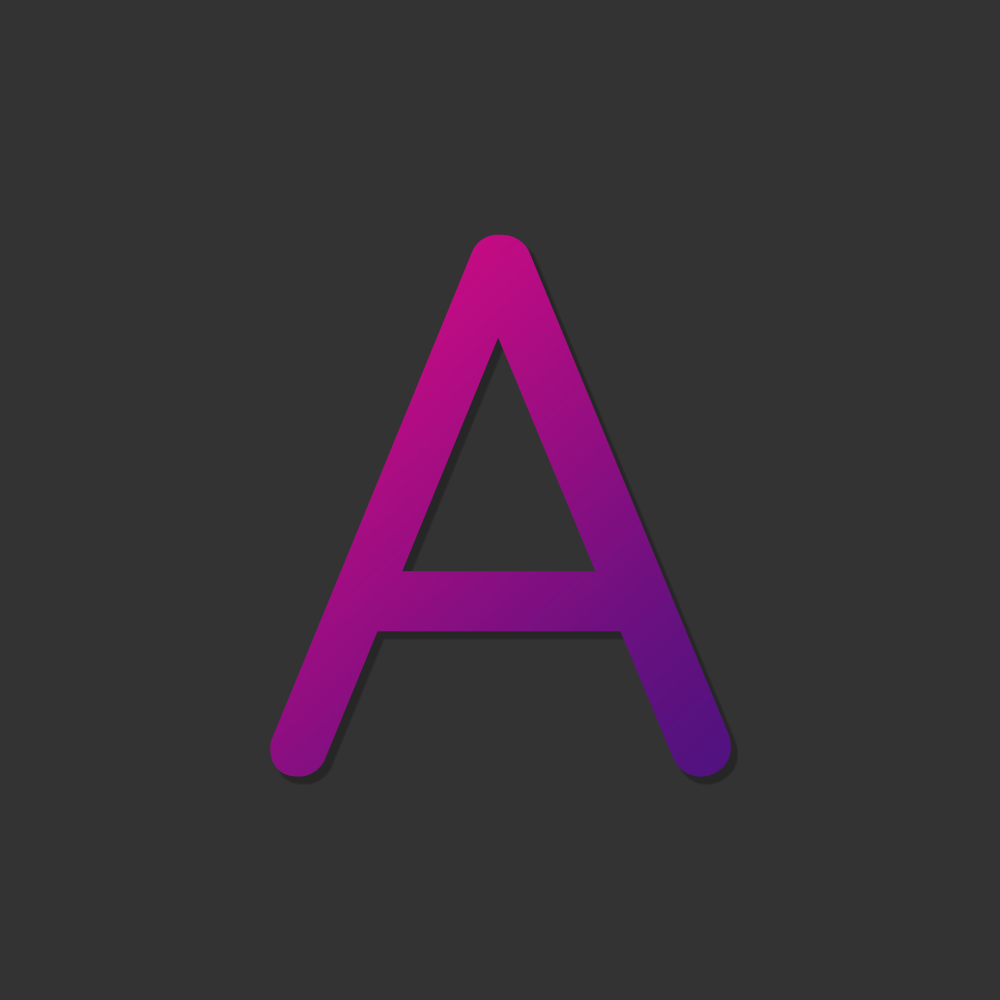
<style>
.page{position:relative;width:1000px;height:1000px;background:#333333}
.page>*{position:absolute;margin:0}
.t1{font:768px "Quicksand-Medium"}
</style>
<div class="page">
<p class="t1" style="left:270px;top:234px;width:461px;height:543px">A</p>
</div>
